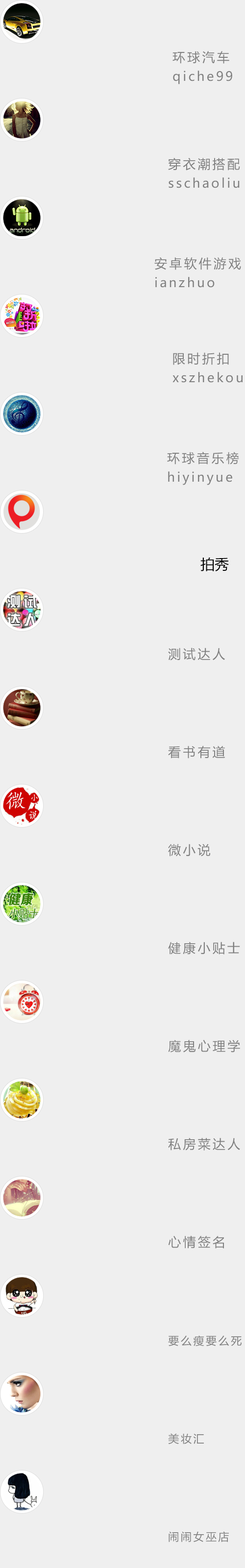
<style>
.page{position:relative;width:245px;height:1568px;background:#efefef}
.page>*{position:absolute;margin:0}
.t1{font:12.7px/19.1px "MicrosoftYaHei";letter-spacing:0.16em;color:#808080}
.t2{font:14.3px "MicrosoftYaHei";color:#000000}
.t3{font:12.7px "MicrosoftYaHei";letter-spacing:0.16em;color:#808080}
.t4{font:10.8px "MicrosoftYaHei";letter-spacing:0.16em;color:#808080}
</style>
<div class="page">
<p class="t1" style="left:172px;top:51px;width:60px;height:33px">环球汽车<br>qiche99</p>
<p class="t1" style="left:168px;top:158px;width:72px;height:30px">穿衣潮搭配<br>sschaoliu</p>
<p class="t1" style="left:154px;top:257px;width:87px;height:31px">安卓软件游戏<br>ianzhuo</p>
<p class="t1" style="left:172px;top:352px;width:71px;height:31px">限时折扣<br>xszhekou</p>
<p class="t1" style="left:167px;top:452px;width:72px;height:33px">环球音乐榜<br>hiyinyue</p>
<p class="t2" style="left:200px;top:557px;width:29px;height:14px">拍秀</p>
<p class="t3" style="left:168px;top:648px;width:57px;height:13px">测试达人</p>
<p class="t3" style="left:168px;top:746px;width:57px;height:13px">看书有道</p>
<p class="t3" style="left:168px;top:844px;width:42px;height:13px">微小说</p>
<p class="t3" style="left:168px;top:942px;width:72px;height:13px">健康小贴士</p>
<p class="t3" style="left:168px;top:1040px;width:72px;height:13px">魔鬼心理学</p>
<p class="t3" style="left:168px;top:1138px;width:72px;height:13px">私房菜达人</p>
<p class="t3" style="left:168px;top:1236px;width:56px;height:13px">心情签名</p>
<p class="t4" style="left:168px;top:1335px;width:74px;height:11px">要么瘦要么死</p>
<p class="t4" style="left:168px;top:1433px;width:36px;height:11px">美妆汇</p>
<p class="t4" style="left:169px;top:1531px;width:60px;height:11px">闹闹女巫店</p>
</div>
